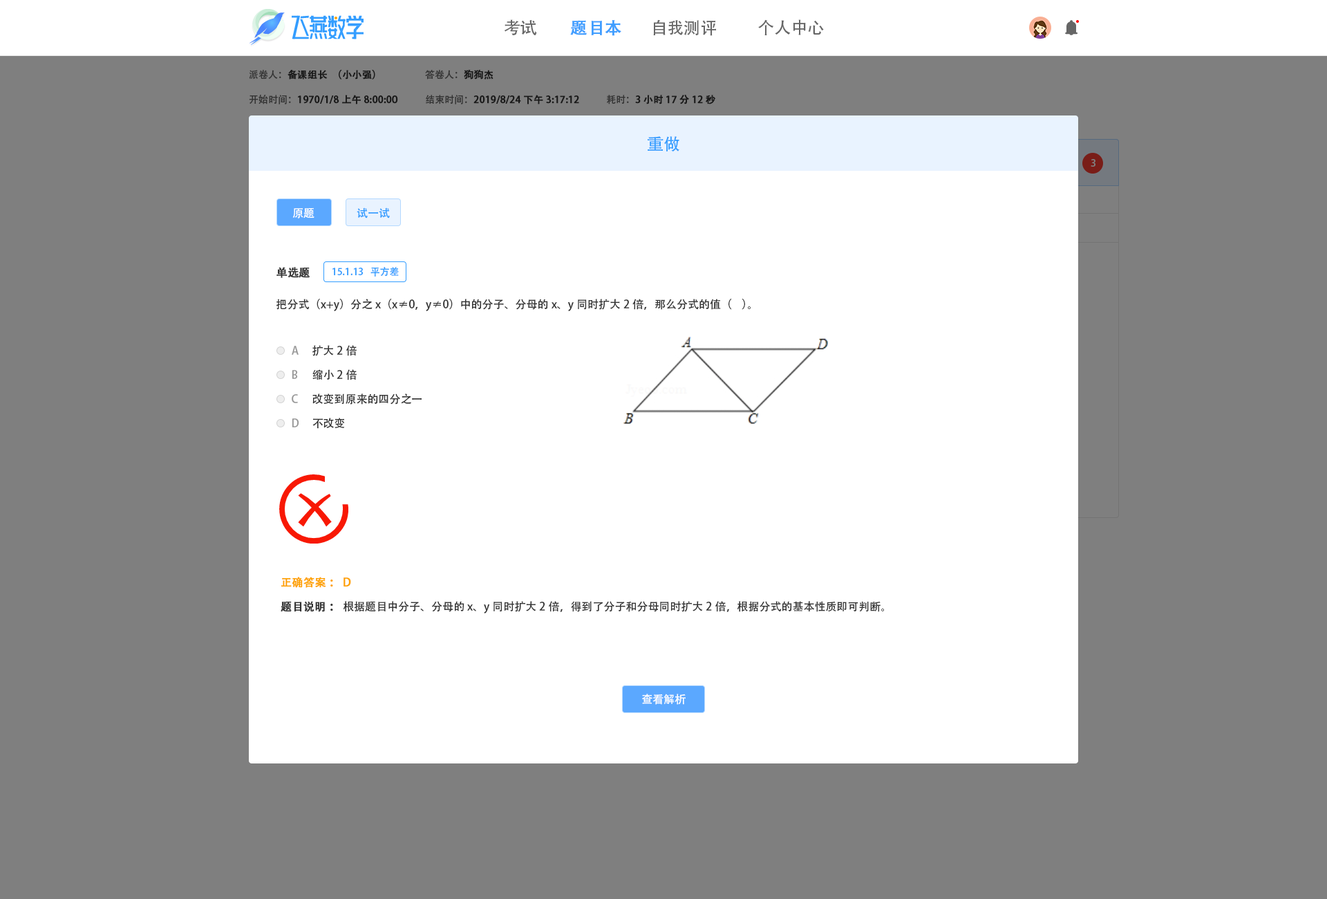
<style>
.page{position:relative;width:1327px;height:899px;background:#7f7f7f}
.page>*{position:absolute;margin:0}
.t1{font:16.6px "AdobeHeitiStd-Regular";color:#666666}
.t2{font:16.6px "AdobeHeitiStd-Regular";color:#409eff;font-weight:bold}
.t3{font:9.7px "AdobeHeitiStd-Regular";color:#191919;font-weight:bold}
.t4{font:9.7px "AdobeHeitiStd-Regular";color:#191919}
.t5{font:9.7px "AdobeHeitiStd-Regular"}
.t6{font:9.7px "AdobeHeitiStd-Regular";font-weight:bold}
.t7{font:16.6px "AdobeHeitiStd-Regular";color:#339dff}
.t8{font:9.7px "AdobeHeitiStd-Regular";color:#7f7f7f}
.t9{font:11.1px "AdobeHeitiStd-Regular";color:#ffffff}
.t10{font:11.1px "AdobeHeitiStd-Regular";color:#339dff}
.t11{font:11.1px "AdobeHeitiStd-Regular";color:#333333;font-weight:bold}
.t12{font:9.7px "AdobeHeitiStd-Regular";color:#339dff}
.t13{font:11.1px "AdobeHeitiStd-Regular";color:#333333}
.t14{font:11.1px "AdobeHeitiStd-Regular";color:#999999}
.t15{font:11.1px "AdobeHeitiStd-Regular";color:#fea300;font-weight:bold}
</style>
<div class="page">
<p class="t1" style="left:504px;top:19px;width:33px;height:16px">考试</p>
<p class="t2" style="left:570px;top:20px;width:51px;height:16px">题目本</p>
<p class="t1" style="left:653px;top:19px;width:63px;height:17px">自我测评</p>
<p class="t1" style="left:758px;top:19px;width:66px;height:16px">个人中心</p>
<p class="t3" style="left:249px;top:70px;width:126px;height:9px"><span class="t4">派卷人：</span>备课组长（小小强）</p>
<p class="t5" style="left:425px;top:69px;width:69px;height:10px">答卷人：<span class="t6">狗狗杰</span></p>
<p class="t3" style="left:249px;top:95px;width:149px;height:9px"><span class="t4">开始时间：</span>1970/1/8 上午8:00:00</p>
<p class="t6" style="left:426px;top:95px;width:153px;height:9px"><span class="t5">结束时间：</span>2019/8/24 下午3:17:12</p>
<p class="t3" style="left:607px;top:95px;width:108px;height:9px"><span class="t4">耗时：</span>3小时17分12秒</p>
<p class="t7" style="left:648px;top:136px;width:31px;height:15px">重做</p>
<p class="t8" style="left:1091px;top:159px;width:5px;height:8px">3</p>
<p class="t9" style="left:292px;top:207px;width:22px;height:11px">原题</p>
<p class="t10" style="left:357px;top:207px;width:33px;height:11px">试一试</p>
<p class="t11" style="left:276px;top:267px;width:34px;height:11px">单选题</p>
<p class="t12" style="left:332px;top:267px;width:67px;height:9px">15.1.13   平方差</p>
<p class="t13" style="left:276px;top:299px;width:475px;height:12px">把分式（x+y）分之x（x≠0，y≠0）中的分子、分母的x、y同时扩大2倍，那么分式的值（    ）。</p>
<p class="t14" style="left:292px;top:346px;width:7px;height:9px">A</p>
<p class="t13" style="left:312px;top:345px;width:45px;height:11px">扩大2倍</p>
<p class="t14" style="left:292px;top:370px;width:6px;height:9px">B</p>
<p class="t13" style="left:312px;top:369px;width:45px;height:11px">缩小2倍</p>
<p class="t14" style="left:292px;top:394px;width:6px;height:9px">C</p>
<p class="t13" style="left:312px;top:393px;width:110px;height:11px">改变到原来的四分之一</p>
<p class="t14" style="left:292px;top:418px;width:7px;height:9px">D</p>
<p class="t13" style="left:312px;top:417px;width:33px;height:12px">不改变</p>
<p class="t15" style="left:281px;top:576px;width:70px;height:12px">正确答案： D</p>
<p class="t13" style="left:281px;top:601px;width:603px;height:12px"><span class="t11">题目说明： </span>根据题目中分子、分母的x、y同时扩大2倍，得到了分子和分母同时扩大2倍，根据分式的基本性质即可判断。</p>
<p class="t9" style="left:642px;top:693px;width:44px;height:11px">查看解析</p>
</div>
